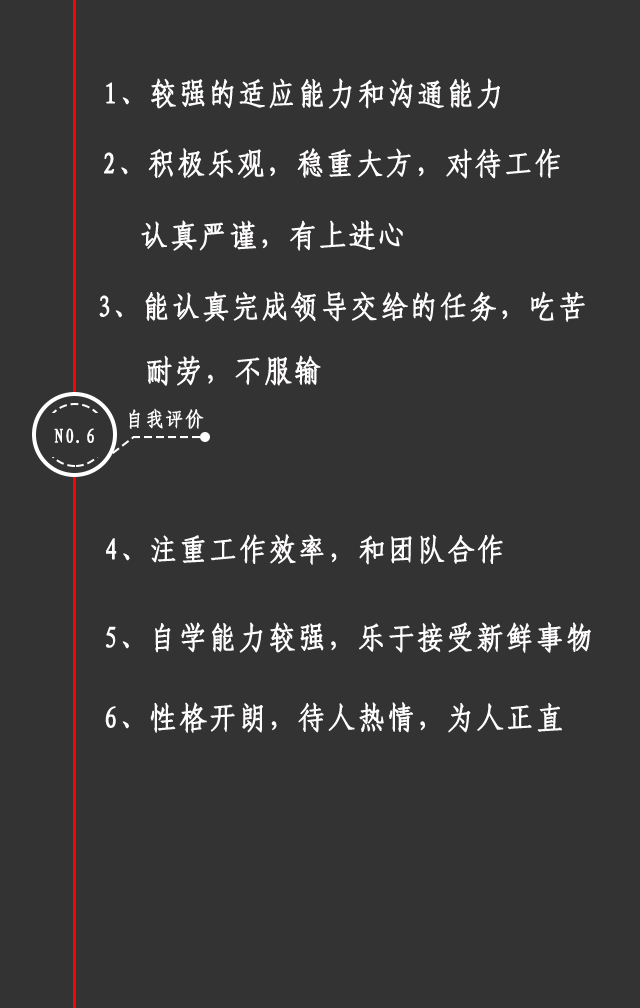
<style>
.page{position:relative;width:640px;height:1008px;background:#333333}
.page>*{position:absolute;margin:0}
.t1{font:30px "-G-s-u-n-0-0-m";letter-spacing:0.05em;color:#fefcfc;font-weight:bold;scale:0.92 1}
.t2{font:20px "-G-s-u-n-0-0-m";letter-spacing:0.05em;color:#fefcfc;font-weight:bold;scale:0.92 1}
</style>
<div class="page">
<p class="t1" style="left:106px;top:78px;width:394px;height:31px">1、较强的适应能力和沟通能力</p>
<p class="t1" style="left:104px;top:148px;width:456px;height:31px">2、积极乐观，稳重大方，对待工作</p>
<p class="t1" style="left:141px;top:220px;width:262px;height:31px">认真严谨，有上进心</p>
<p class="t1" style="left:99px;top:291px;width:486px;height:31px">3、能认真完成领导交给的任务，吃苦</p>
<p class="t1" style="left:147px;top:355px;width:174px;height:31px">耐劳，不服输</p>
<p class="t2" style="left:129px;top:408px;width:75px;height:21px">自我评价</p>
<p class="t2" style="left:54px;top:428px;width:40px;height:16px">N0.6</p>
<p class="t1" style="left:106px;top:534px;width:397px;height:31px">4、注重工作效率，和团队合作</p>
<p class="t1" style="left:105px;top:622px;width:486px;height:31px">5、自学能力较强，乐于接受新鲜事物</p>
<p class="t1" style="left:105px;top:702px;width:457px;height:31px">6、性格开朗，待人热情，为人正直</p>
</div>
